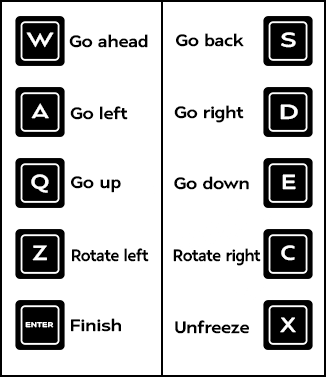
<style>
.page{position:relative;width:326px;height:377px;background:#ffffff}
.page>*{position:absolute;margin:0}
.t1{font:16.4px "FrescitoVariablePERSONAL-Medium";color:#000000;scale:1.12 1}
.t2{font:16.4px "FrescitoVariablePERSONAL-Medium";color:#000000;scale:0.96 1}
.t3{font:6.8px "FrescitoVariablePERSONAL-Medium";color:#ffffff;scale:1.31 1}
</style>
<div class="page">
<p class="t1" style="left:69px;top:34px;width:79px;height:14px">Go ahead</p>
<p class="t1" style="left:176px;top:33px;width:68px;height:14px">Go back</p>
<p class="t1" style="left:70px;top:106px;width:58px;height:14px">Go left</p>
<p class="t1" style="left:174px;top:105px;width:70px;height:18px">Go right</p>
<p class="t1" style="left:71px;top:176px;width:50px;height:17px">Go up</p>
<p class="t1" style="left:174px;top:176px;width:75px;height:14px">Go down</p>
<p class="t2" style="left:72px;top:248px;width:77px;height:14px">Rotate left</p>
<p class="t2" style="left:173px;top:248px;width:88px;height:18px">Rotate right</p>
<p class="t1" style="left:71px;top:318px;width:50px;height:14px">Finish</p>
<p class="t3" style="left:25px;top:322px;width:29px;height:6px">ENTER</p>
<p class="t1" style="left:175px;top:320px;width:74px;height:14px">Unfreeze</p>
</div>
